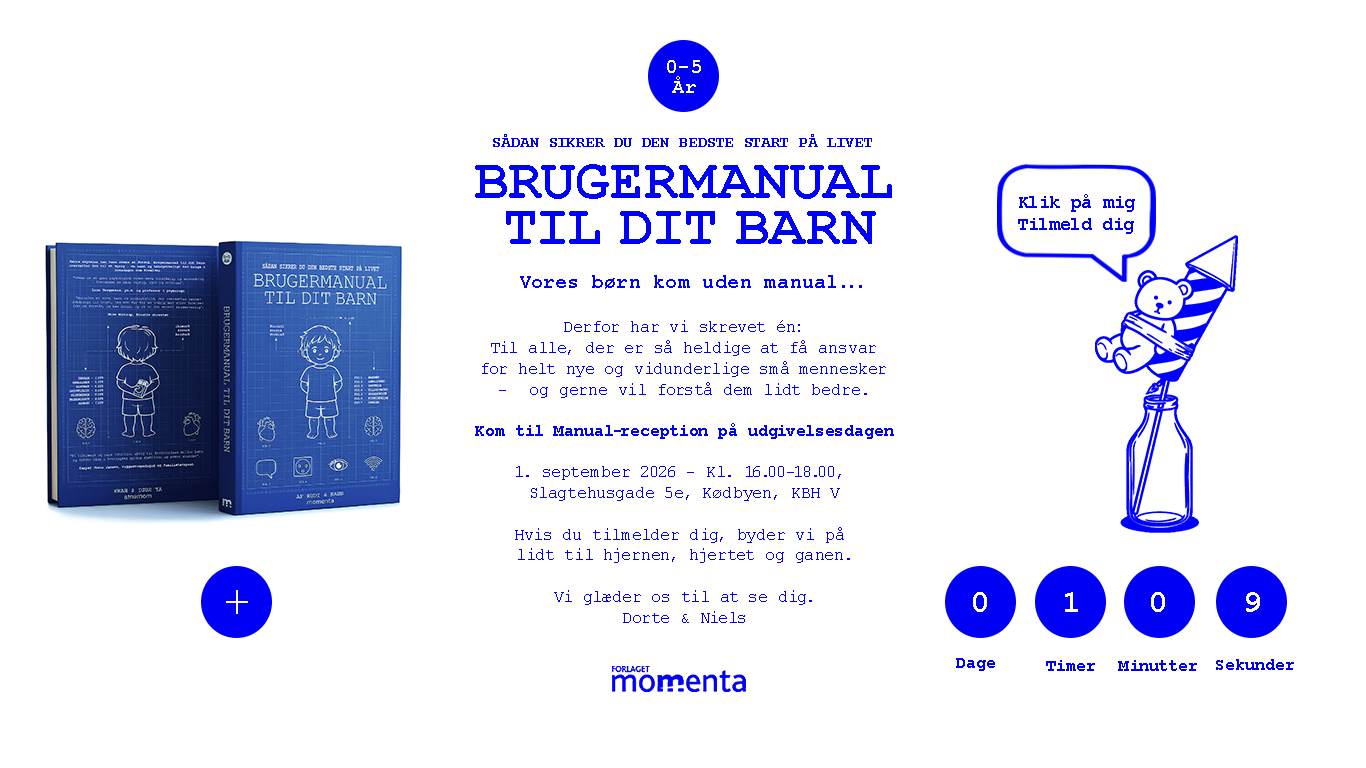
<style>
.page{position:relative;width:1366px;height:768px;background:#ffffff}
.page>*{position:absolute;margin:0}
.t1{font:20px/20px "CourierNewPS-BoldMT";letter-spacing:0.05em;color:#ffffff}
.t2{font:20px/20px "CourierNewPS-BoldMT";letter-spacing:-0.005em;color:#ffffff}
.t3{font:20px/20px "CourierNewPS-BoldMT";letter-spacing:0.01em;color:#ffffff}
.t4{font:16px "CourierNewPS-BoldMT";letter-spacing:-0.01em;color:#0000ff}
.t5{font:57.3px "CourierNewPS-BoldMT";letter-spacing:0.015em;color:#0000ff}
.t6{font:18.7px "CourierNewPS-BoldMT";letter-spacing:-0.025em;color:#0000f5}
.t7{font:57.3px "CourierNewPS-BoldMT";letter-spacing:0.011em;color:#0000ff}
.t8{font:57.3px "CourierNewPS-BoldMT";letter-spacing:0.009em;color:#0000ff}
.t9{font:57.3px "CourierNewPS-BoldMT";letter-spacing:0.013em;color:#0000ff}
.t10{font:20px "CourierNewPS-BoldMT";letter-spacing:0.015em;color:#0000ff}
.t11{font:17.3px "CourierNewPSMT";letter-spacing:-0.03em;color:#0000ff}
.t12{font:17.3px "CourierNewPS-BoldMT";letter-spacing:-0.03em;color:#0000ff}
.t13{font:48px "CourierNewPSMT";letter-spacing:-0.02em;color:#ffffff;scale:0.96 1}
.t14{font:32px "CourierNewPS-BoldMT";letter-spacing:-0.025em;color:#ffffff}
.t15{font:17.3px "CourierNewPS-BoldMT";letter-spacing:-0.025em;color:#0000f5}
</style>
<div class="page">
<p class="t1" style="left:667px;top:60px;width:34px;height:33px;text-align:center"><span class="t2">0</span>-5<br><span class="t3">År</span></p>
<p class="t4" style="left:493px;top:134px;width:379px;height:13px">SÅDAN SIKRER DU DEN BEDSTE START PÅ LIVET</p>
<p class="t5" style="left:475px;top:164px;width:417px;height:35px">BRUGERMANUAL</p>
<p class="t6" style="left:1018px;top:194px;width:117px;height:40px">Klik på mig<br>Tilmeld dig</p>
<p class="t7" style="left:506px;top:211px;width:94px;height:33px">TIL</p>
<p class="t8" style="left:620px;top:211px;width:95px;height:33px">DIT</p>
<p class="t9" style="left:736px;top:211px;width:140px;height:33px">BARN</p>
<p class="t10" style="left:520px;top:275px;width:342px;height:14px">Vores børn kom uden manual...</p>
<p class="t11" style="left:482px;top:320px;width:404px;height:78px;text-align:center">Derfor har vi skrevet én:<br>Til alle, der er så heldige at få ansvar <br>for helt nye og vidunderlige små mennesker<br>og gerne vil forstå dem lidt bedre.</p>
<p class="t11" style="left:475px;top:423px;width:419px;height:200px;text-align:center"><span class="t12">Kom til Manual-reception på udgivelsesdagen<br><br></span>1. september 2026 - Kl. 16.00-18.00, <br>Slagtehusgade 5e, Kødbyen, KBH V<br><br>Hvis du tilmelder dig, byder vi på <br>lidt til hjernen, hjertet og ganen.<br><br>Vi glæder os til at se dig.<br>Dorte &amp; Niels</p>
<p class="t13" style="left:226px;top:590px;width:22px;height:24px">+</p>
<p class="t14" style="left:973px;top:592px;width:14px;height:20px">0</p>
<p class="t14" style="left:1065px;top:592px;width:13px;height:20px">1</p>
<p class="t14" style="left:1151px;top:592px;width:14px;height:20px">0</p>
<p class="t14" style="left:1246px;top:592px;width:14px;height:20px">9</p>
<p class="t15" style="left:956px;top:658px;width:39px;height:13px">Dage</p>
<p class="t15" style="left:1046px;top:660px;width:49px;height:11px">Timer</p>
<p class="t15" style="left:1118px;top:660px;width:79px;height:11px">Minutter</p>
<p class="t15" style="left:1216px;top:659px;width:78px;height:11px">Sekunder</p>
</div>
